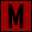
<style>
.page{position:relative;width:32px;height:32px;background:#9d0000}
.page>*{position:absolute;margin:0}
.t1{font:32px "AgencyFB-Bold";letter-spacing:0.04em;color:#000000}
</style>
<div class="page">
<p class="t1" style="left:8px;top:4px;width:16px;height:24px">M</p>
</div>
